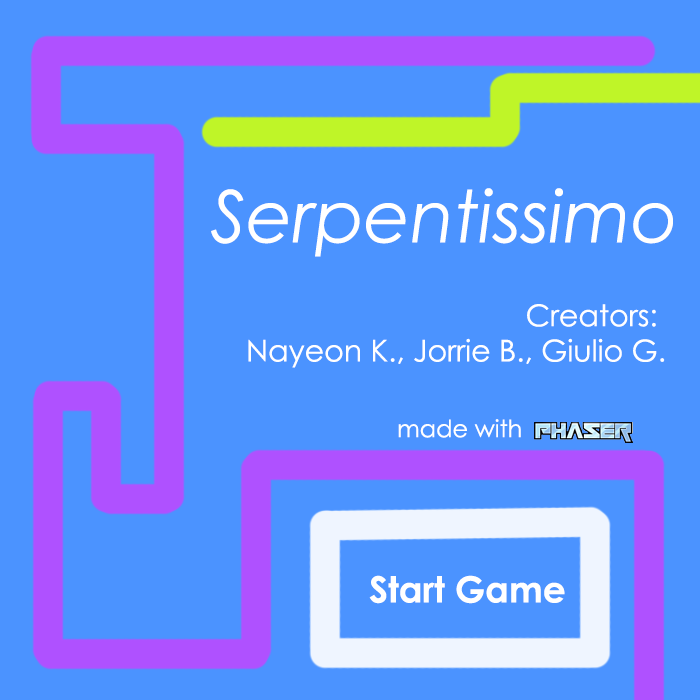
<style>
.page{position:relative;width:700px;height:700px;background:#4b93ff}
.page>*{position:absolute;margin:0}
.t1{font:72px "CenturyGothic-Italic";color:#ffffff}
.t2{font:30px "CenturyGothic";color:#ffffff}
.t3{font:30px/6px "CenturyGothic";color:#ffffff}
.t4{font:24px "CenturyGothic";color:#ffffff}
.t5{font:36px "CenturyGothic-Bold";color:#ffffff}
</style>
<div class="page">
<p class="t1" style="left:211px;top:188px;width:462px;height:69px">Serpentissimo</p>
<p class="t2" style="left:248px;top:304px;width:417px;height:64px;text-align:right"><span class="t3">Creators: <br></span>Nayeon K., Jorrie B., Giulio G.</p>
<p class="t4" style="left:398px;top:419px;width:123px;height:19px">made with</p>
<p class="t5" style="left:369px;top:575px;width:196px;height:29px">Start Game</p>
</div>
